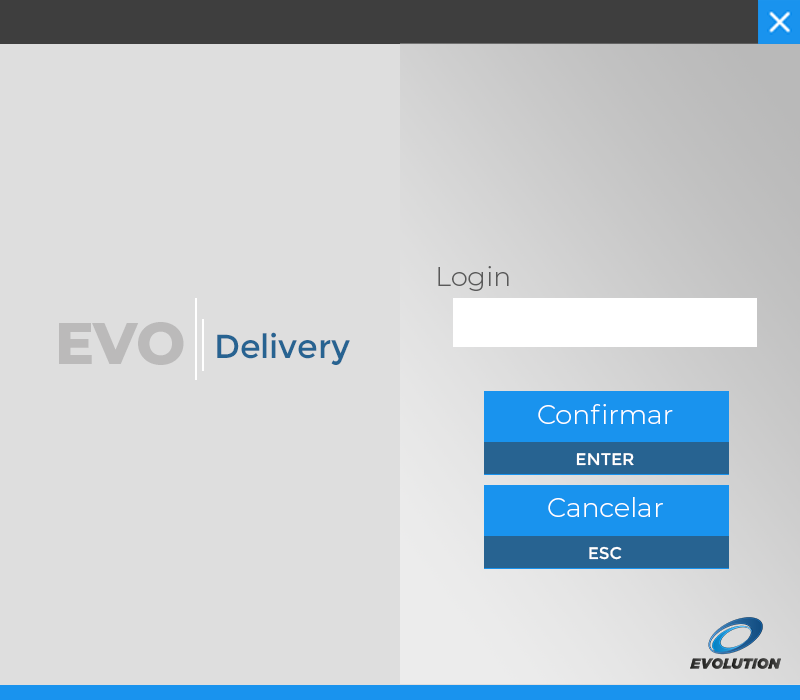
<style>
.page{position:relative;width:800px;height:700px;background:#dedede}
.page>*{position:absolute;margin:0}
.t1{font:26.8px "Montserrat-Light";color:#595959}
.t2{font:58.3px "Montserrat-ExtraBold";color:#bbbaba}
.t3{font:33.3px "Montserrat-Regular";color:#276391}
.t4{font:26.8px "Montserrat-Light";color:#ffffff}
.t5{font:16.8px "Montserrat-Regular";color:#ffffff}
</style>
<div class="page">
<p class="t1" style="left:438px;top:266px;width:71px;height:25px">Login</p>
<p class="t2" style="left:59px;top:322px;width:125px;height:43px">EVO</p>
<p class="t3" style="left:217px;top:332px;width:133px;height:33px">Delivery</p>
<p class="t4" style="left:538px;top:404px;width:135px;height:20px">Confirmar</p>
<p class="t5" style="left:576px;top:453px;width:58px;height:13px">ENTER</p>
<p class="t4" style="left:548px;top:497px;width:115px;height:20px">Cancelar</p>
<p class="t5" style="left:589px;top:546px;width:33px;height:14px">ESC</p>
</div>
